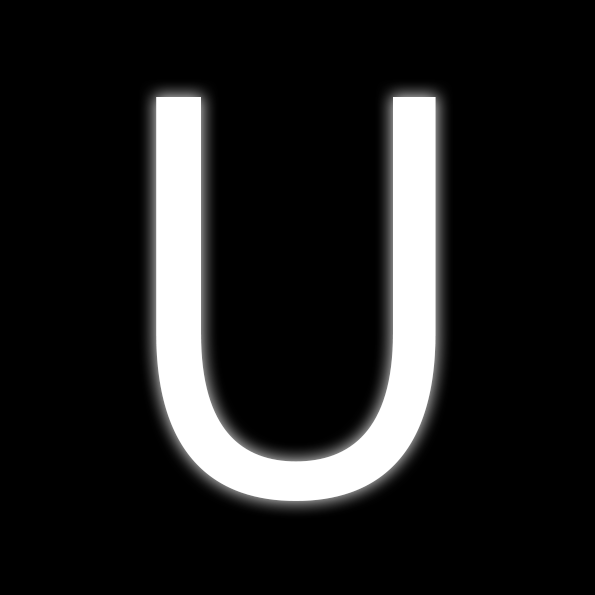
<style>
.page{position:relative;width:595px;height:595px;background:#000000}
.page>*{position:absolute;margin:0}
.t1{font:542.5px "SourceHanSansCN-Normal";color:#ffffff}
</style>
<div class="page">
<p class="t1" style="left:156px;top:97px;width:280px;height:404px">U</p>
</div>
